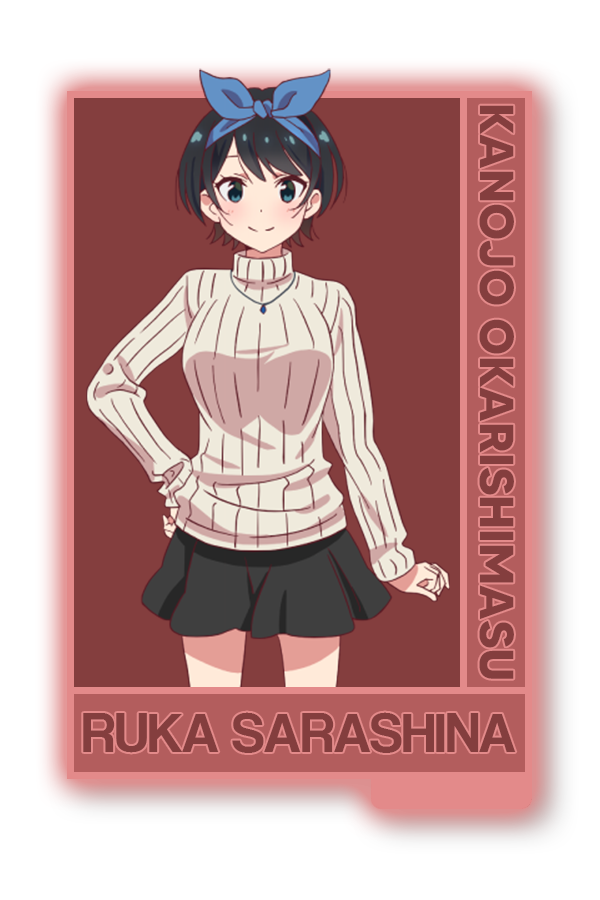
<style>
.page{position:relative;width:600px;height:900px;background:#843e3e}
.page>*{position:absolute;margin:0}
.t1{font:47.6px "MADETOMMY-Bold";color:#843e3e}
.t2{font:56.7px "CoolveticaRg-Regular";color:#843e3e}
</style>
<div class="page">
<p class="t1" style="left:479px;top:105px;width:35px;height:574px;rotate:90deg">KANOJO OKARISHIMASU</p>
<p class="t2" style="left:83px;top:712px;width:433px;height:41px">RUKA SARASHINA</p>
</div>
